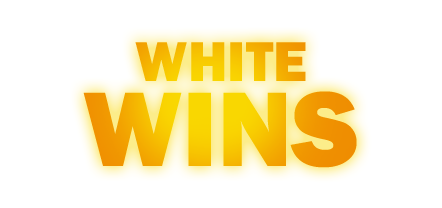
<style>
.page{position:relative;width:442px;height:208px;background:#ffffff}
.page>*{position:absolute;margin:0}
.t1{font:58px/85px "FranklinGothic-Heavy"}
.t2{font:110px/85px "FranklinGothic-Heavy"}
</style>
<div class="page">
<p class="t1" style="left:83px;top:42px;width:274px;height:126px;text-align:center">WHITE<br><span class="t2">WINS</span></p>
</div>
